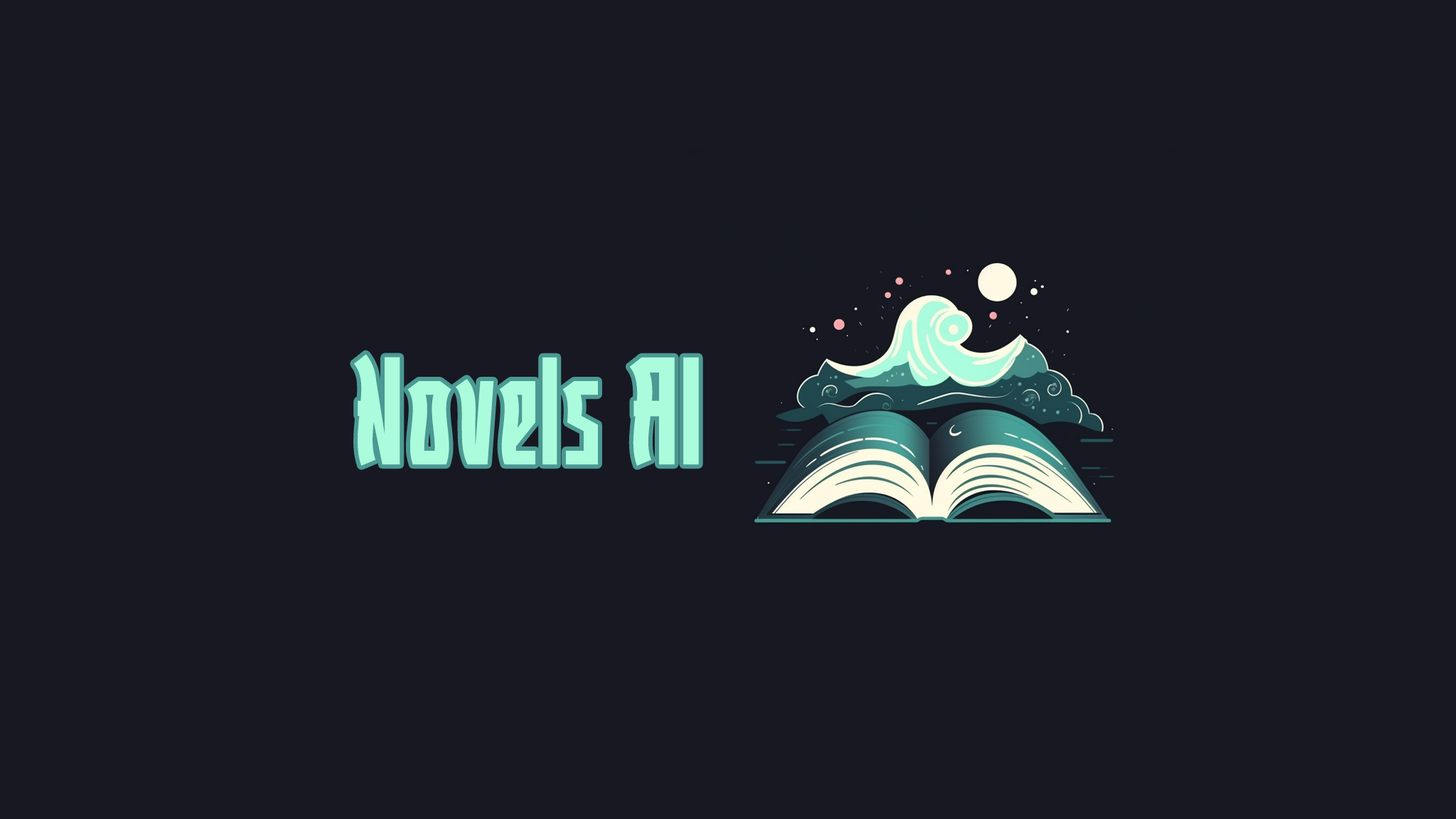
<style>
.page{position:relative;width:1456px;height:819px;background:#171822}
.page>*{position:absolute;margin:0}
.t1{font:152.6px "FAGUMEHtrial-Regular";letter-spacing:0.01em;color:#abfcdd}
</style>
<div class="page">
<p class="t1" style="left:354px;top:354px;width:345px;height:112px">Novels AI</p>
</div>
